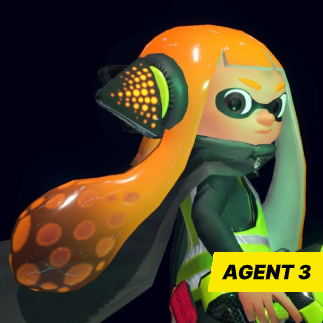
<style>
.page{position:relative;width:323px;height:323px;background:#010012}
.page>*{position:absolute;margin:0}
.t1{font:20px "InterUI-BlackItalic";color:#000000}
</style>
<div class="page">
<p class="t1" style="left:222px;top:264px;width:89px;height:16px">AGENT 3</p>
</div>
